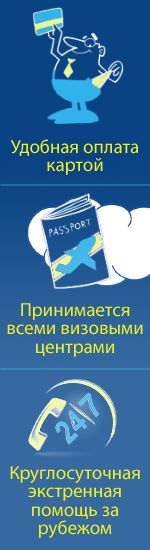
<style>
.page{position:relative;width:150px;height:550px;background:#3669a0}
.page>*{position:absolute;margin:0}
.t1{font:19px/18px "MyriadPro-Regular";color:#edf123}
</style>
<div class="page">
<p class="t1" style="left:10px;top:139px;width:128px;height:36px;text-align:center">Удобная оплата картой</p>
<p class="t1" style="left:7px;top:303px;width:136px;height:54px;text-align:center">Принимается всеми визовыми центрами</p>
<p class="t1" style="left:10px;top:466px;width:130px;height:73px;text-align:center">Круглосуточная экстренная помощь за <br>рубежом</p>
</div>
